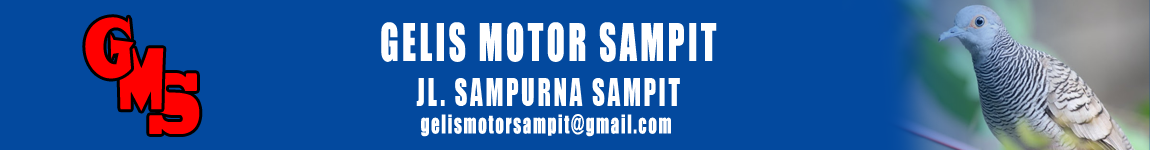
<style>
.page{position:relative;width:1150px;height:150px;background:#03499e}
.page>*{position:absolute;margin:0}
.t1{font:81.1px "SnapITC-Regular";letter-spacing:0.1em;color:#ff0000;scale:0.7 1}
.t2{font:48px "Impact";letter-spacing:0.1em;color:#ffffff;scale:0.7 1}
.t3{font:81.1px "ShowcardGothic-Reg";letter-spacing:0.1em;color:#ff0000;scale:0.7 1}
.t4{font:81.1px "BlackoakStd";letter-spacing:0.1em;color:#ff0000;scale:0.41 1}
.t5{font:36px "Impact";letter-spacing:0.1em;color:#ffffff;scale:0.7 1}
.t6{font:24px "Impact";letter-spacing:0.1em;color:#ffffff;scale:0.7 1}
</style>
<div class="page">
<p class="t1" style="left:85px;top:17px;width:49px;height:62px">G</p>
<p class="t2" style="left:381px;top:22px;width:336px;height:40px">GELIS MOTOR SAMPIT</p>
<p class="t3" style="left:118px;top:48px;width:46px;height:63px">M</p>
<p class="t4" style="left:149px;top:73px;width:51px;height:61px">S</p>
<p class="t5" style="left:416px;top:78px;width:264px;height:28px">JL. SAMPURNA SAMPIT</p>
<p class="t6" style="left:421px;top:114px;width:250px;height:23px">gelismotorsampit@gmail.com</p>
</div>
